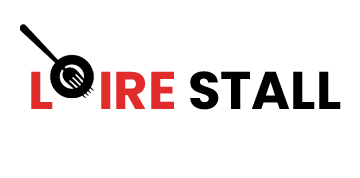
<style>
.page{position:relative;width:360px;height:178px;background:#ffffff}
.page>*{position:absolute;margin:0}
.t1{font:52.9px "Poppins-Bold";color:#e22c2c}
.t2{font:52.9px "Poppins-Bold";color:#000000}
</style>
<div class="page">
<p class="t1" style="left:31px;top:71px;width:310px;height:39px">L    IRE<span class="t2"> STALL</span></p>
</div>
